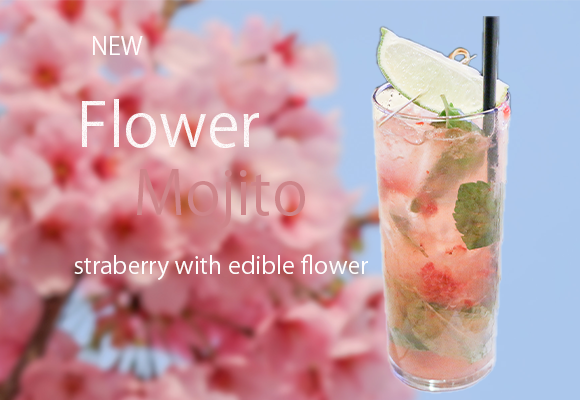
<style>
.page{position:relative;width:580px;height:400px}
.page>*{position:absolute;margin:0}
.t1{font:24px "KozGoPr6N-Regular";color:#fffefe}
.t2{font:60px "KozGoPr6N-Regular";color:#fdf9f9}
</style>
<div class="page">
<p class="t1" style="left:93px;top:36px;width:50px;height:19px">NEW</p>
<p class="t2" style="left:82px;top:99px;width:177px;height:49px">Flower</p>
<p class="t1" style="left:74px;top:254px;width:294px;height:26px">straberry with edible flower</p>
</div>
